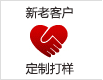
<style>
.page{position:relative;width:103px;height:80px;background:#ffffff}
.page>*{position:absolute;margin:0}
.t1{font:12px "MicrosoftYaHei";color:#302929}
</style>
<div class="page">
<p class="t1" style="left:25px;top:6px;width:48px;height:13px">新老客户</p>
<p class="t1" style="left:25px;top:62px;width:49px;height:13px">定制打样</p>
</div>
